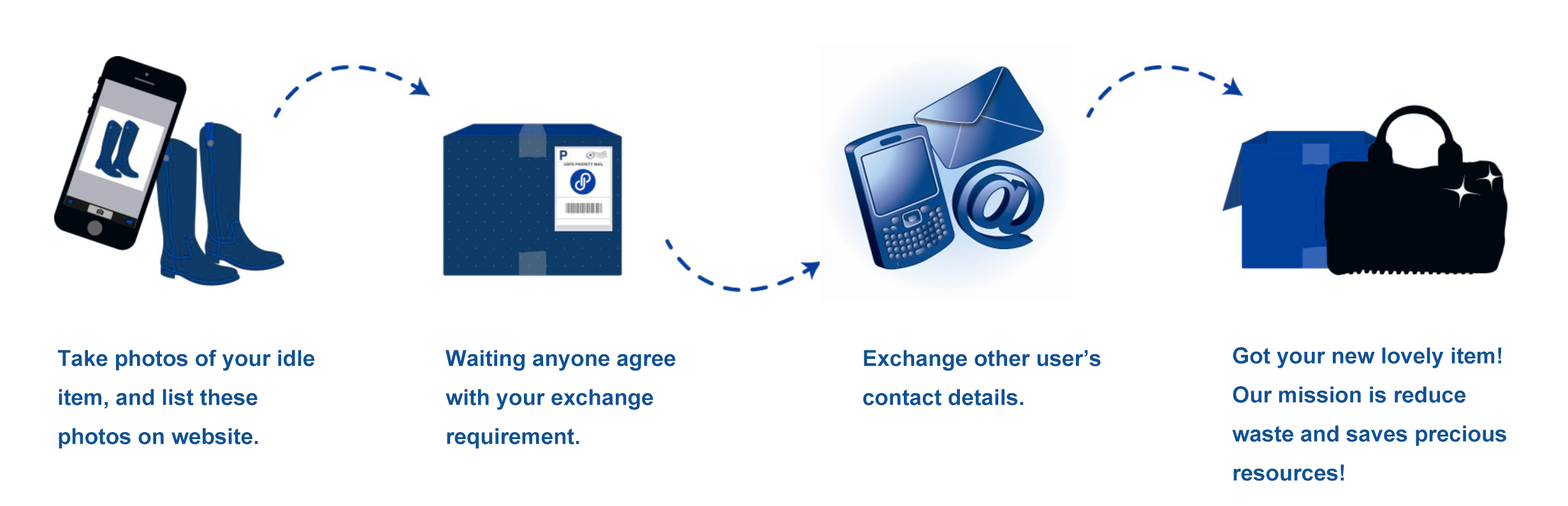
<style>
.page{position:relative;width:1568px;height:506px;background:#ffffff}
.page>*{position:absolute;margin:0}
.t1{font:22.3px "Arial-BoldMT";color:#0d5295}
</style>
<div class="page">
<p class="t1" style="left:57px;top:349px;width:258px;height:100px">Take photos of your idle item, and list these photos on website.</p>
<p class="t1" style="left:446px;top:350px;width:230px;height:99px">Waiting anyone agree with your exchange requirement.</p>
<p class="t1" style="left:863px;top:350px;width:238px;height:55px">Exchange other user’s contact details.</p>
<p class="t1" style="left:1232px;top:347px;width:274px;height:134px">Got your new lovely item!<br>Our mission is reduce waste and saves precious resources!</p>
</div>
